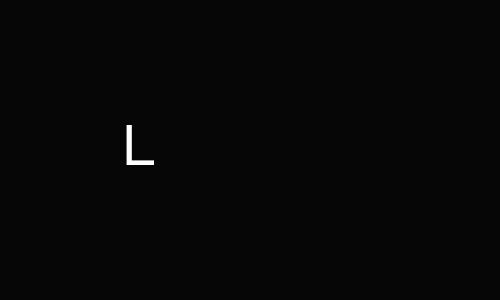
<style>
.page{position:relative;width:500px;height:300px;background:#060606}
.page>*{position:absolute;margin:0}
.t1{font:55.6px "Raleway-Medium";color:#ffffff}
</style>
<div class="page">
<p class="t1" style="left:126px;top:125px;width:28px;height:40px">L</p>
</div>
